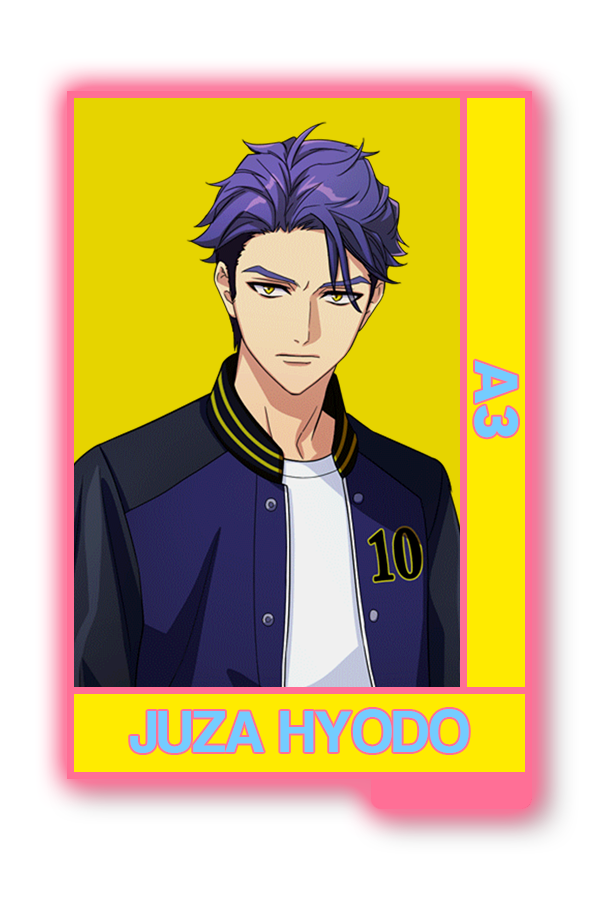
<style>
.page{position:relative;width:600px;height:900px;background:#ffffff}
.page>*{position:absolute;margin:0}
.t1{font:60.5px "MADETOMMY-Bold";color:#74ccff}
.t2{font:60.9px "CoolveticaRg-Regular";color:#74ccff}
</style>
<div class="page">
<p class="t1" style="left:474px;top:360px;width:44px;height:78px;rotate:90deg">A3</p>
<p class="t2" style="left:130px;top:709px;width:339px;height:44px">JUZA HYODO</p>
</div>
